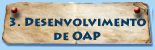
<style>
.page{position:relative;width:155px;height:50px}
.page>*{position:absolute;margin:0}
.t1{font:12px "LithosPro-Black";color:#0b3b5e}
</style>
<div class="page">
<p class="t1" style="left:9px;top:17px;width:137px;height:24px;text-align:center">3. Desenvolvimento<br>de OAP</p>
</div>
